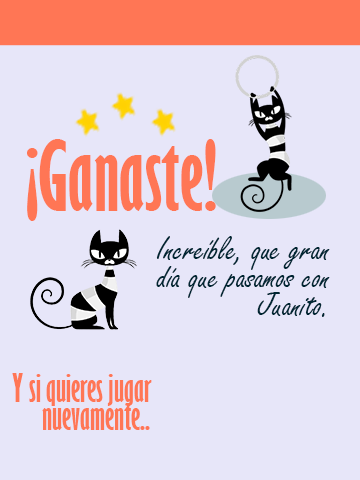
<style>
.page{position:relative;width:360px;height:480px;background:#e7e6f9}
.page>*{position:absolute;margin:0}
.t1{font:91.4px "GillSansMT-ExtraCondensedBold";color:#ff7655}
.t2{font:35.6px/27.9px "FreestyleScript-Regular";color:#002633}
.t3{font:35.6px/27.9px "GillSansMT-ExtraCondensedBold";color:#ff7655}
</style>
<div class="page">
<p class="t1" style="left:27px;top:139px;width:189px;height:82px">¡Ganaste!</p>
<p class="t2" style="left:156px;top:236px;width:174px;height:81px;text-align:right">Increíble, que gran<br>día que pasamos con<br>Juanito.</p>
<p class="t3" style="left:12px;top:373px;width:140px;height:57px;text-align:right">Y si quieres jugar <br>nuevamente..</p>
</div>
